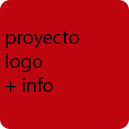
<style>
.page{position:relative;width:129px;height:129px;background:#bf0411}
.page>*{position:absolute;margin:0}
.t1{font:20px "MyriadPro-Regular";color:#000000}
</style>
<div class="page">
<p class="t1" style="left:5px;top:31px;width:74px;height:61px">proyecto<br>logo<br>+ info</p>
</div>
